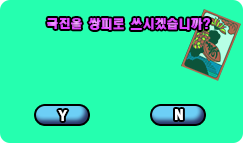
<style>
.page{position:relative;width:243px;height:143px;background:#25ffaf}
.page>*{position:absolute;margin:0}
.t1{font:12px "HeadlineR-HM"}
.t2{font:12px "HeadlineR-HM";color:#fefefe}
</style>
<div class="page">
<p class="t1" style="left:47px;top:18px;width:164px;height:12px">국진을 쌍피로 쓰시겠습니까?</p>
<p class="t2" style="left:58px;top:110px;width:10px;height:11px">Y</p>
<p class="t2" style="left:175px;top:109px;width:8px;height:11px">N</p>
</div>
